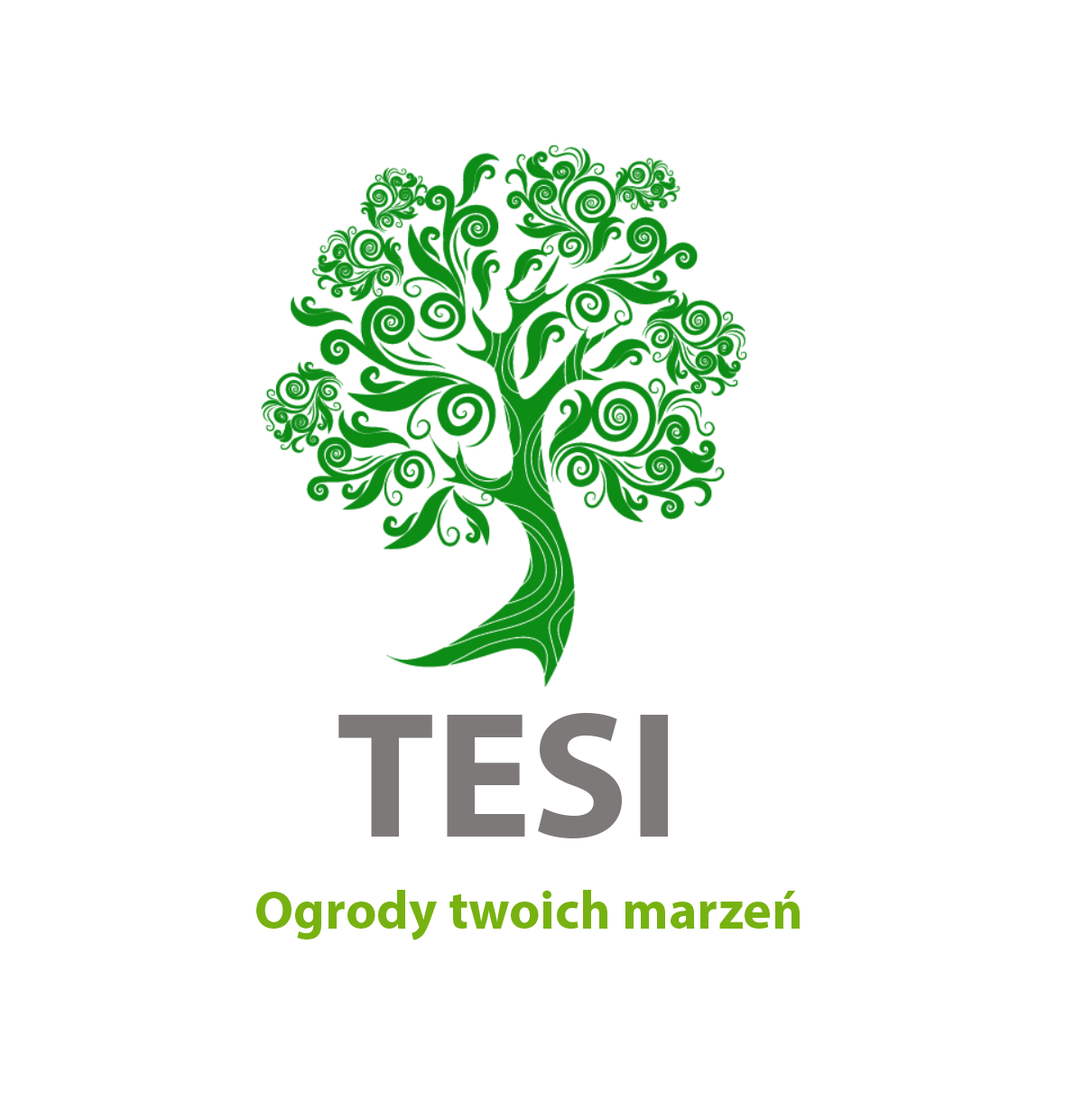
<style>
.page{position:relative;width:1083px;height:1101px;background:#ffffff}
.page>*{position:absolute;margin:0}
.t1{font:180.5px "MyriadPro-Bold";color:#7d7979}
.t2{font:54.2px "MyriadPro-Bold";color:#77b211}
</style>
<div class="page">
<p class="t1" style="left:338px;top:713px;width:330px;height:125px">TESI</p>
<p class="t2" style="left:256px;top:890px;width:544px;height:50px">Ogrody twoich marzeń</p>
</div>
